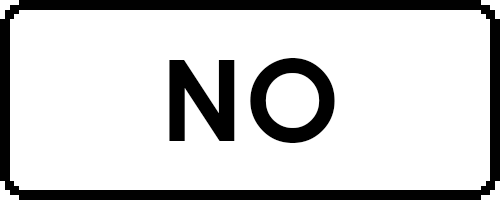
<style>
.page{position:relative;width:500px;height:200px;background:#ffffff}
.page>*{position:absolute;margin:0}
.t1{font:113px "CenturyGothic-Bold";letter-spacing:0.01em;color:#000000}
</style>
<div class="page">
<p class="t1" style="left:169px;top:58px;width:166px;height:85px">NO</p>
</div>
